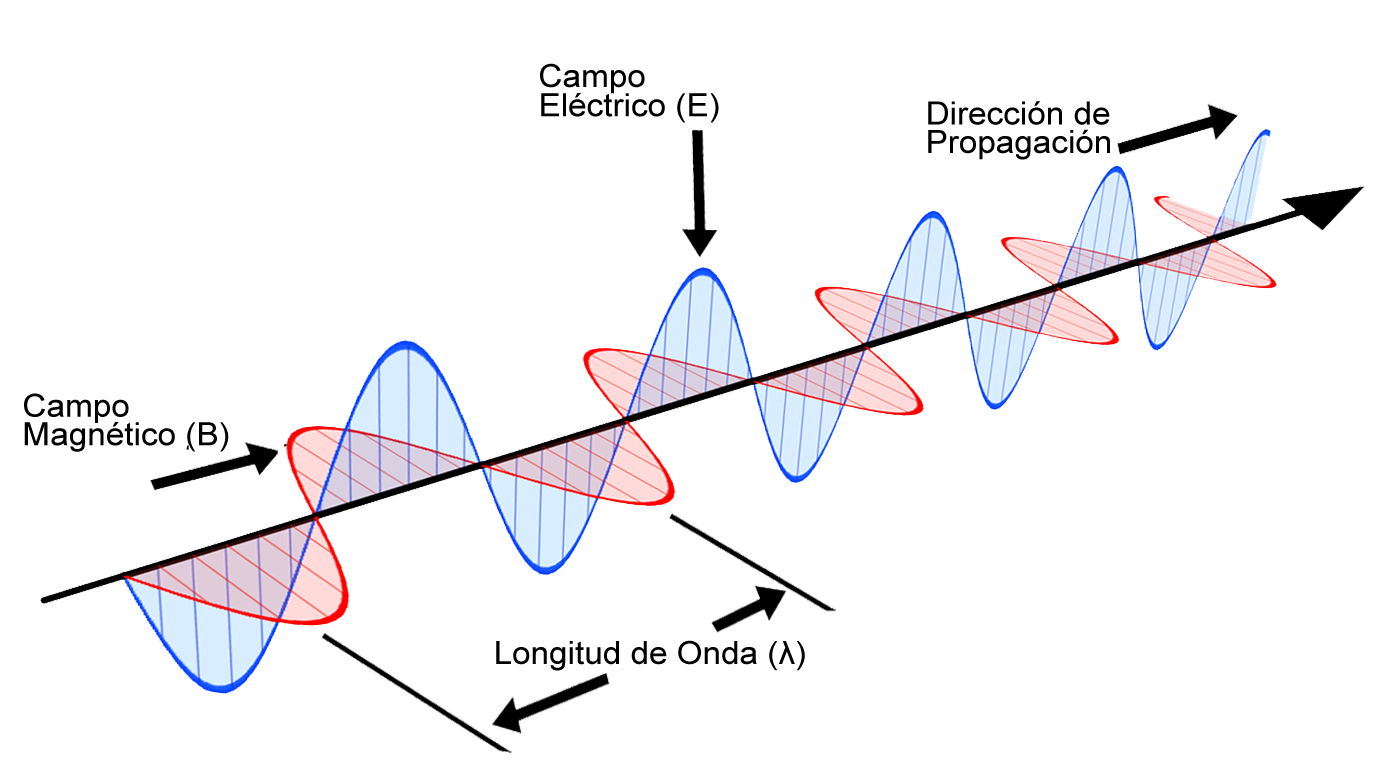
<style>
.page{position:relative;width:1386px;height:760px;background:#ffffff}
.page>*{position:absolute;margin:0}
.t1{font:32px/29.3px "ArialMT";color:#000000;scale:1.04 1}
.t2{font:32px/4.6px "ArialMT";color:#000000;scale:1.04 1}
.t3{font:32px/28.6px "ArialMT";color:#000000;scale:1.04 1}
.t4{font:32px "ArialMT";color:#000000;scale:1.04 1}
</style>
<div class="page">
<p class="t1" style="left:540px;top:63px;width:179px;height:60px"><span class="t2">Campo<br></span>Eléctrico (E)</p>
<p class="t3" style="left:928px;top:101px;width:182px;height:59px">Dirección de <br>Propagación</p>
<p class="t3" style="left:24px;top:393px;width:205px;height:59px">Campo <br>Magnético (B)</p>
<p class="t4" style="left:496px;top:640px;width:309px;height:31px">Longitud de Onda (λ)</p>
</div>
